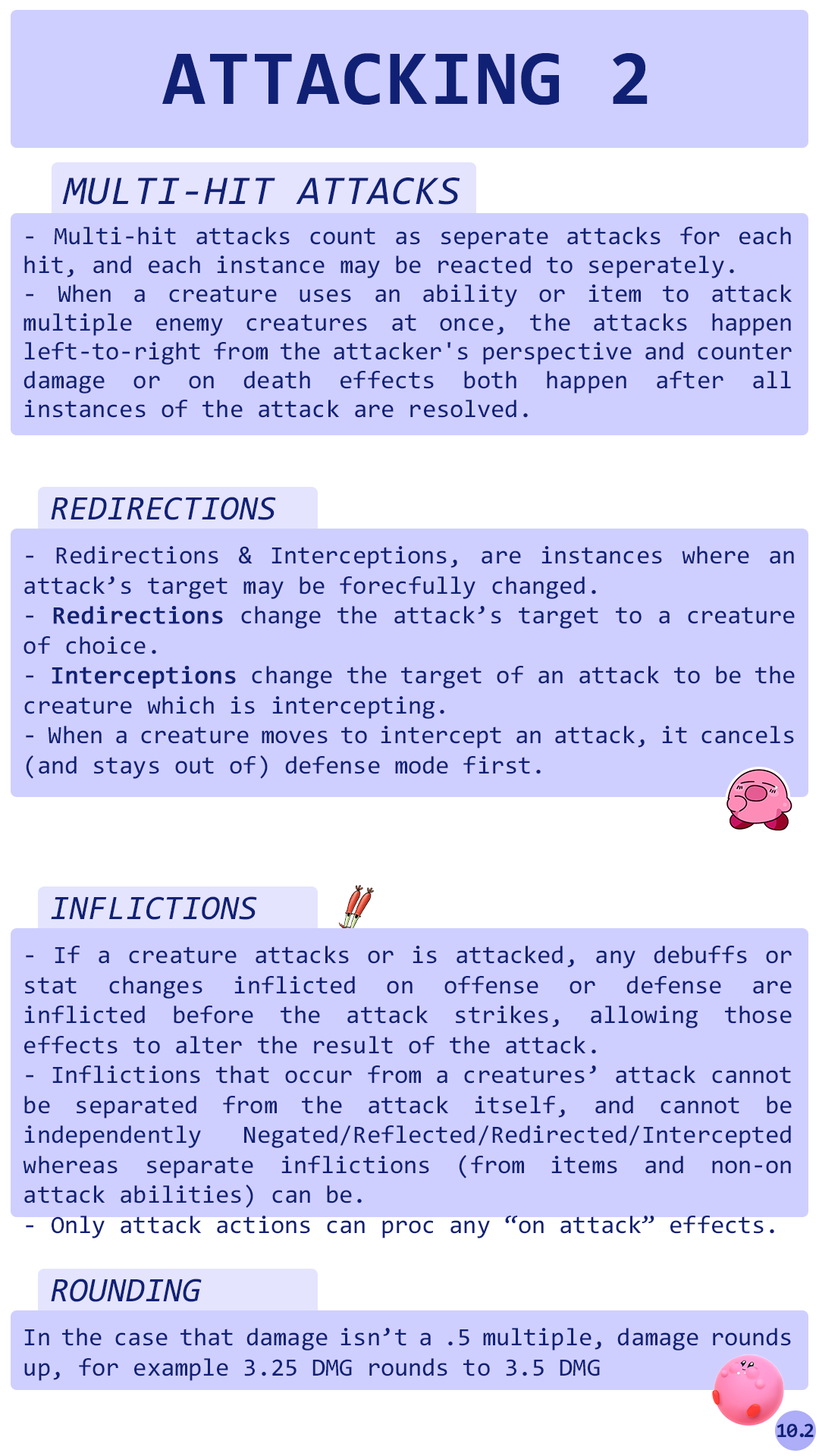
<style>
.page{position:relative;width:819px;height:1456px;background:#cfcfff}
.page>*{position:absolute;margin:0}
.t1{font:78.3px "Consolas-Bold";letter-spacing:0.02em;color:#102175}
.t2{font:41.1px "Consolas-Italic";letter-spacing:0.02em;color:#102175}
.t3{font:25px/28.8px "Consolas";color:#102175}
.t4{font:34.3px "Consolas-Italic";color:#102175}
.t5{font:25px "Consolas";color:#102175}
.t6{font:25px "Consolas";color:#102175;font-weight:bold}
.t7{font:20.5px "Consolas-Bold";letter-spacing:-0.06em;color:#102175}
.t8{font:20.5px "Consolas-Bold";letter-spacing:-0.22em;color:#102175}
</style>
<div class="page">
<p class="t1" style="left:162px;top:53px;width:486px;height:52px">ATTACKING 2</p>
<p class="t2" style="left:62px;top:177px;width:398px;height:28px">MULTI-HIT ATTACKS</p>
<p class="t3" style="left:24px;top:227px;width:768px;height:191px;text-align:justify">- Multi-hit attacks count as seperate attacks for each hit, and each instance may be reacted to seperately.<br>- When a creature uses an ability or item to attack multiple enemy creatures at once, the attacks happen left-to-right from the attacker's perspective and counter damage or on death effects both happen after all instances of the attack are resolved.</p>
<p class="t4" style="left:51px;top:497px;width:225px;height:23px">REDIRECTIONS</p>
<p class="t5" style="left:24px;top:546px;width:771px;height:233px;text-align:justify">- Redirections &amp; Interceptions, are instances where an attack’s target may be forecfully changed.<br>- <span class="t6">Redirections</span> change the attack’s target to a creature of choice.<br>- <span class="t6">Interceptions</span> change the target of an attack to be the creature which is intercepting.<br>- When a creature moves to intercept an attack, it cancels (and stays out of) defense mode first.</p>
<p class="t4" style="left:51px;top:896px;width:206px;height:24px">INFLICTIONS</p>
<p class="t5" style="left:23px;top:946px;width:769px;height:292px;text-align:justify">- If a creature attacks or is attacked, any debuffs or stat changes inflicted on offense or defense are inflicted before the attack strikes, allowing those effects to alter the result of the attack. <br>- Inflictions that occur from a creatures’ attack cannot be separated from the attack itself, and cannot be independently Negated/Reflected/Redirected/Intercepted whereas separate inflictions (from items and non-on attack abilities) can be.<br>- Only attack actions can proc any “on attack” effects.</p>
<p class="t4" style="left:51px;top:1279px;width:151px;height:23px">ROUNDING</p>
<p class="t5" style="left:24px;top:1328px;width:767px;height:53px;text-align:justify">In the case that damage isn’t a .5 multiple, damage rounds up, for example 3.25 DMG rounds to 3.5 DMG</p>
<p class="t7" style="left:777px;top:1423px;width:37px;height:15px">10<span class="t8">.</span>2</p>
</div>
